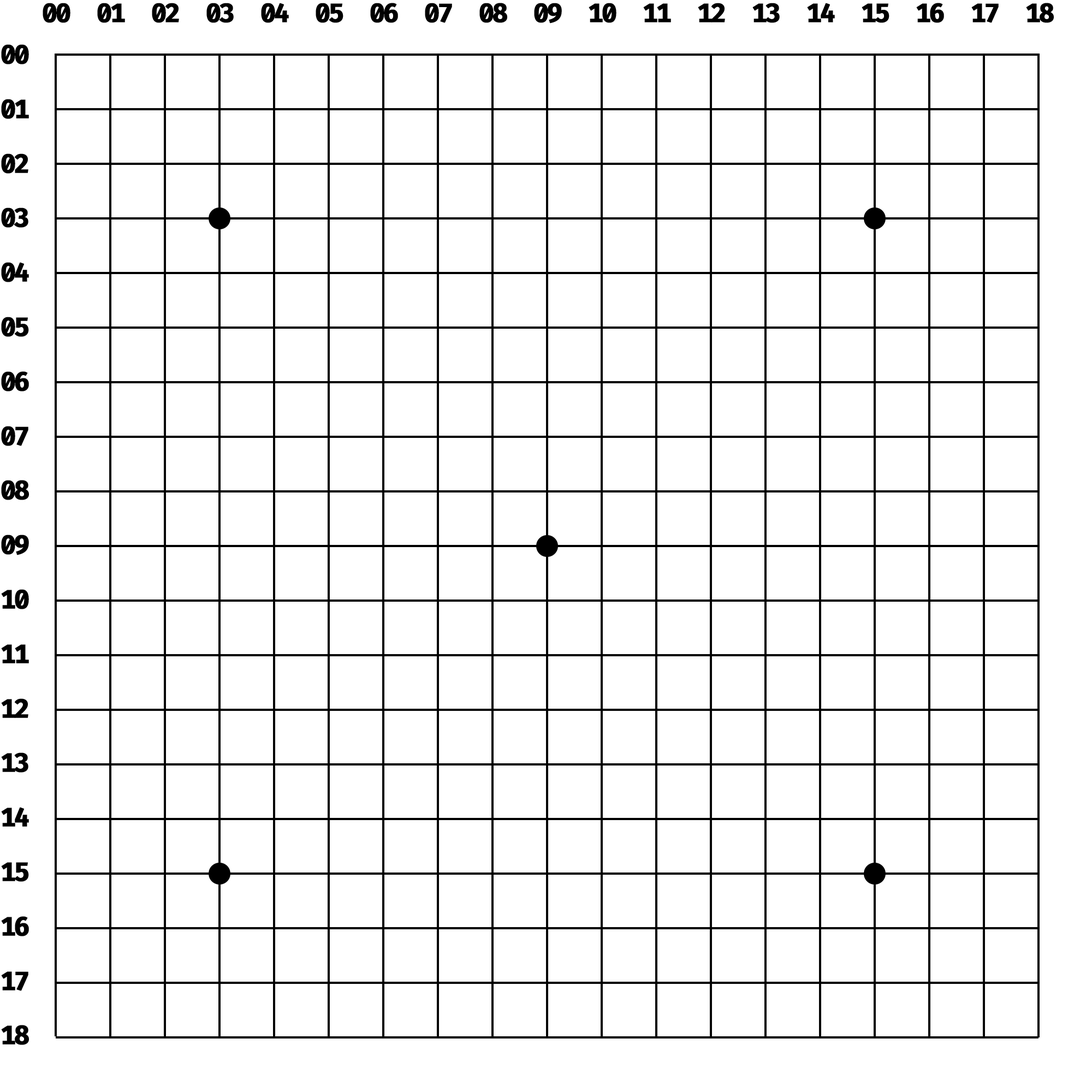
<style>
.page{position:relative;width:1092px;height:1092px;background:#ffffff}
.page>*{position:absolute;margin:0}
.t1{font:26.2px "FiraCode-Bold";letter-spacing:-0.106em;color:#000000;font-weight:bold}
.t2{font:26.2px/54.5px "FiraCode-Bold";letter-spacing:-0.106em;color:#000000;font-weight:bold}
</style>
<div class="page">
<p class="t1" style="left:43px;top:3px;width:1011px;height:20px">00  01  02  03  04  05  06  07  08  09  10  11  12  13  14  15  16  17  18</p>
<p class="t2" style="left:1px;top:44px;width:28px;height:1001px">00<br>01<br>02<br>03<br>04<br>05<br>06<br>07<br>08<br>09<br>10<br>11<br>12<br>13<br>14<br>15<br>16<br>17<br>18</p>
</div>
